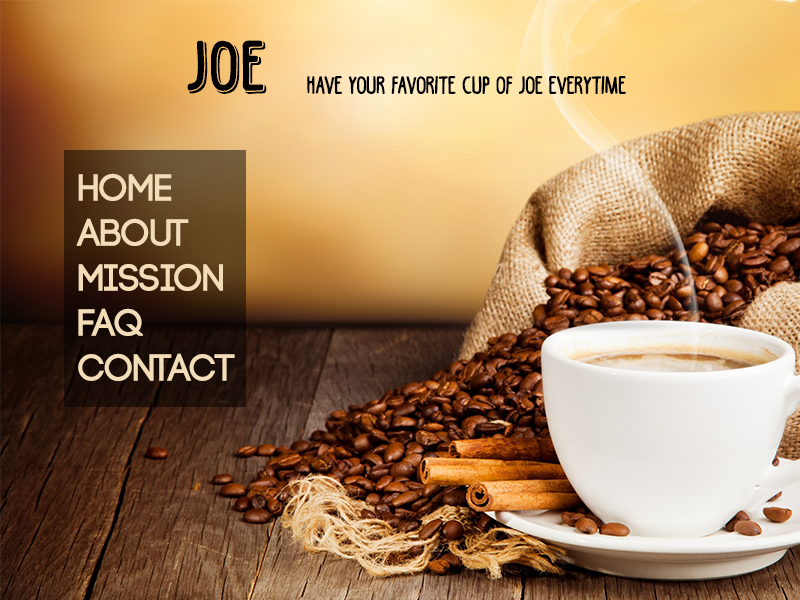
<style>
.page{position:relative;width:800px;height:600px}
.page>*{position:absolute;margin:0}
.t1{font:25px "BlackCoffeeRegular-Bold";color:#000000}
.t2{font:75px "BlackCoffeeShadow-Bold";color:#000000}
.t3{font:37.5px "Code-Bold";color:#f3dcb8}
</style>
<div class="page">
<p class="t1" style="left:187px;top:40px;width:439px;height:54px"><span class="t2">Joe  </span>have your favorite cup of joe everytime</p>
<p class="t3" style="left:76px;top:173px;width:159px;height:208px">Home<br>About<br>Mission<br>FAQ<br>Contact</p>
</div>
